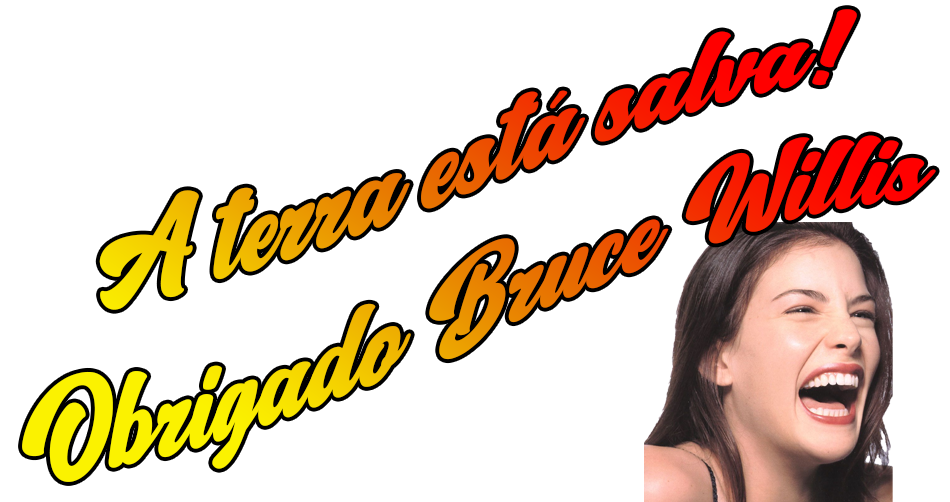
<style>
.page{position:relative;width:950px;height:502px;background:#ffffff}
.page>*{position:absolute;margin:0}
.t1{font:123.7px "OhChewy";font-style:italic}
</style>
<div class="page">
<p class="t1" style="left:22px;top:9px;width:914px;height:473px;text-align:center">A terra está salva!<br>Obrigado Bruce Willis</p>
</div>
